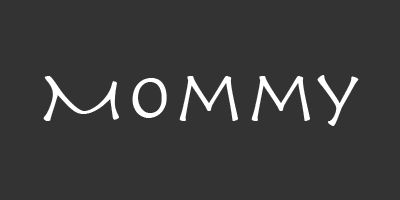
<style>
.page{position:relative;width:400px;height:200px;background:#333333}
.page>*{position:absolute;margin:0}
.t1{font:75px "Herculanum";color:#ffffff}
</style>
<div class="page">
<p class="t1" style="left:43px;top:75px;width:316px;height:51px">Mommy</p>
</div>
